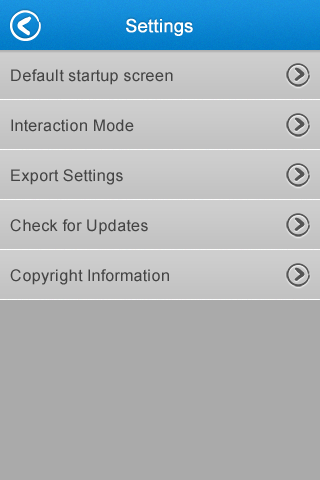
<style>
.page{position:relative;width:320px;height:480px;background:#aaaaaa}
.page>*{position:absolute;margin:0}
.t1{font:18px "ArialMT";letter-spacing:0.025em;color:#ffffff;font-weight:bold}
.t2{font:16px "ArialMT";letter-spacing:0.025em;color:#444444}
</style>
<div class="page">
<p class="t1" style="left:126px;top:18px;width:67px;height:18px">Settings</p>
<p class="t2" style="left:11px;top:69px;width:162px;height:16px">Default startup screen</p>
<p class="t2" style="left:11px;top:119px;width:123px;height:13px">Interaction Mode</p>
<p class="t2" style="left:11px;top:169px;width:112px;height:16px">Export Settings</p>
<p class="t2" style="left:10px;top:219px;width:138px;height:16px">Check for Updates</p>
<p class="t2" style="left:10px;top:269px;width:159px;height:16px">Copyright Information</p>
</div>
